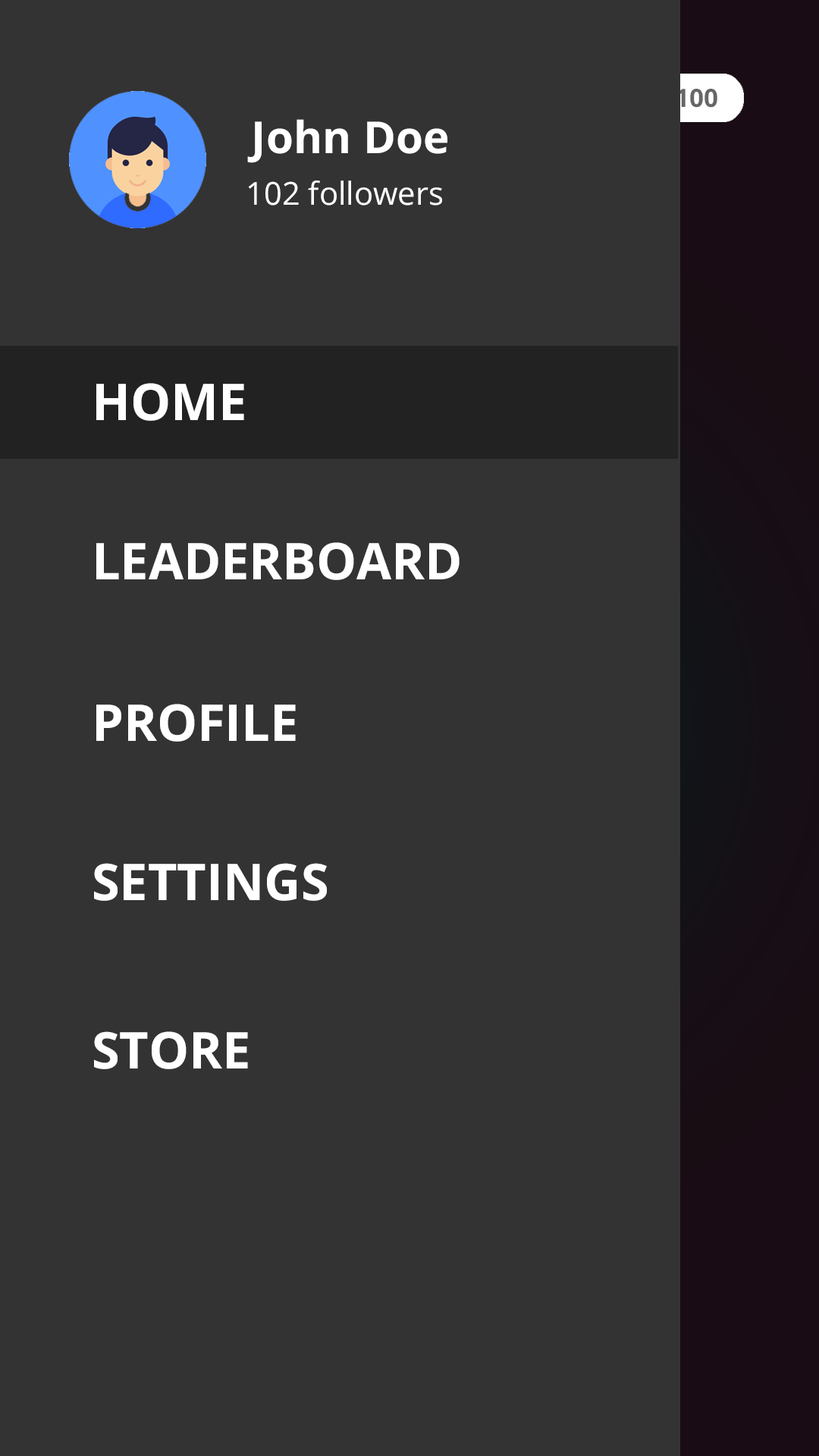
<style>
.page{position:relative;width:819px;height:1456px;background:#333333}
.page>*{position:absolute;margin:0}
.t1{font:25.3px "OpenSans-Bold";color:#666666}
.t2{font:44.2px "OpenSans-Bold";color:#ffffff}
.t3{font:31.6px "OpenSans";color:#ffffff}
.t4{font:50.6px "OpenSans-Bold";color:#ffffff}
</style>
<div class="page">
<p class="t1" style="left:676px;top:89px;width:41px;height:19px">100</p>
<p class="t2" style="left:247px;top:119px;width:200px;height:44px">John Doe</p>
<p class="t3" style="left:248px;top:180px;width:194px;height:26px">102 followers</p>
<p class="t4" style="left:96px;top:383px;width:148px;height:38px">HOME</p>
<p class="t4" style="left:96px;top:542px;width:364px;height:38px">LEADERBOARD</p>
<p class="t4" style="left:96px;top:704px;width:200px;height:38px">PROFILE</p>
<p class="t4" style="left:94px;top:863px;width:233px;height:38px">SETTINGS</p>
<p class="t4" style="left:94px;top:1031px;width:154px;height:38px">STORE</p>
</div>
